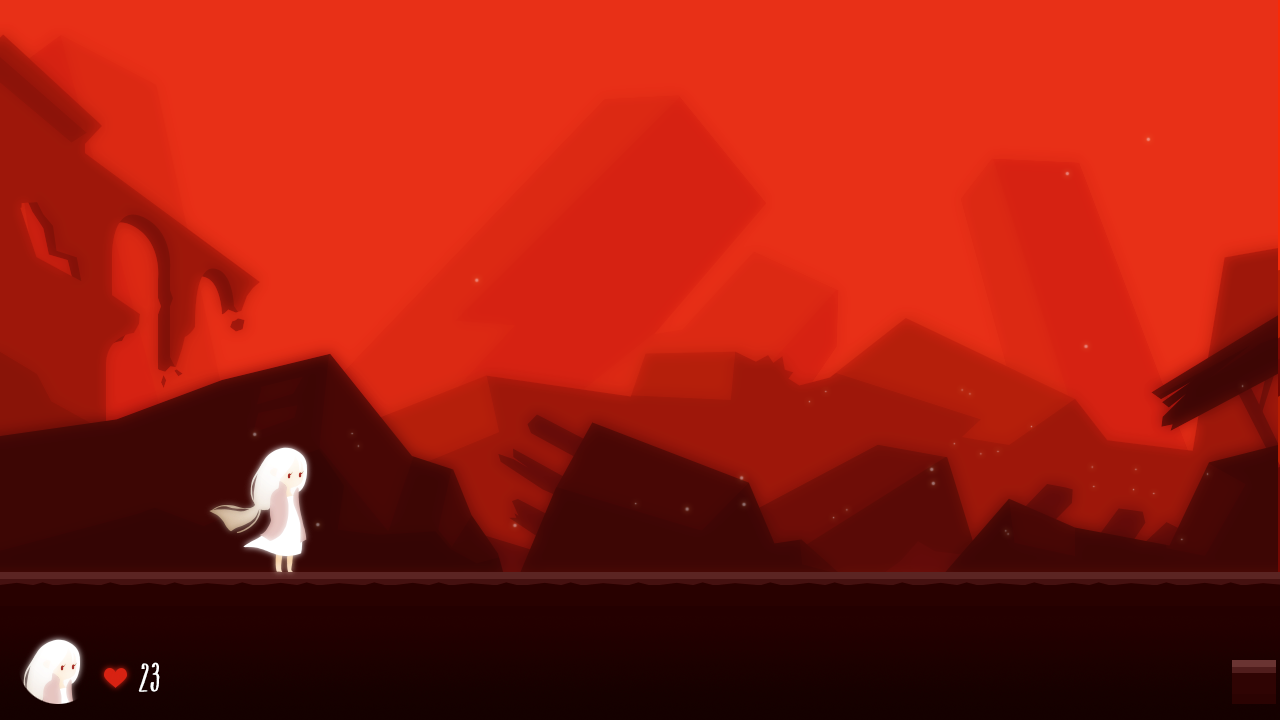
<style>
.page{position:relative;width:1280px;height:720px;background:#e83017}
.page>*{position:absolute;margin:0}
.t1{font:30px "FaithAndGloryTwo";letter-spacing:0.075em;color:#ffffff}
</style>
<div class="page">
<p class="t1" style="left:138px;top:662px;width:22px;height:30px">23</p>
</div>
